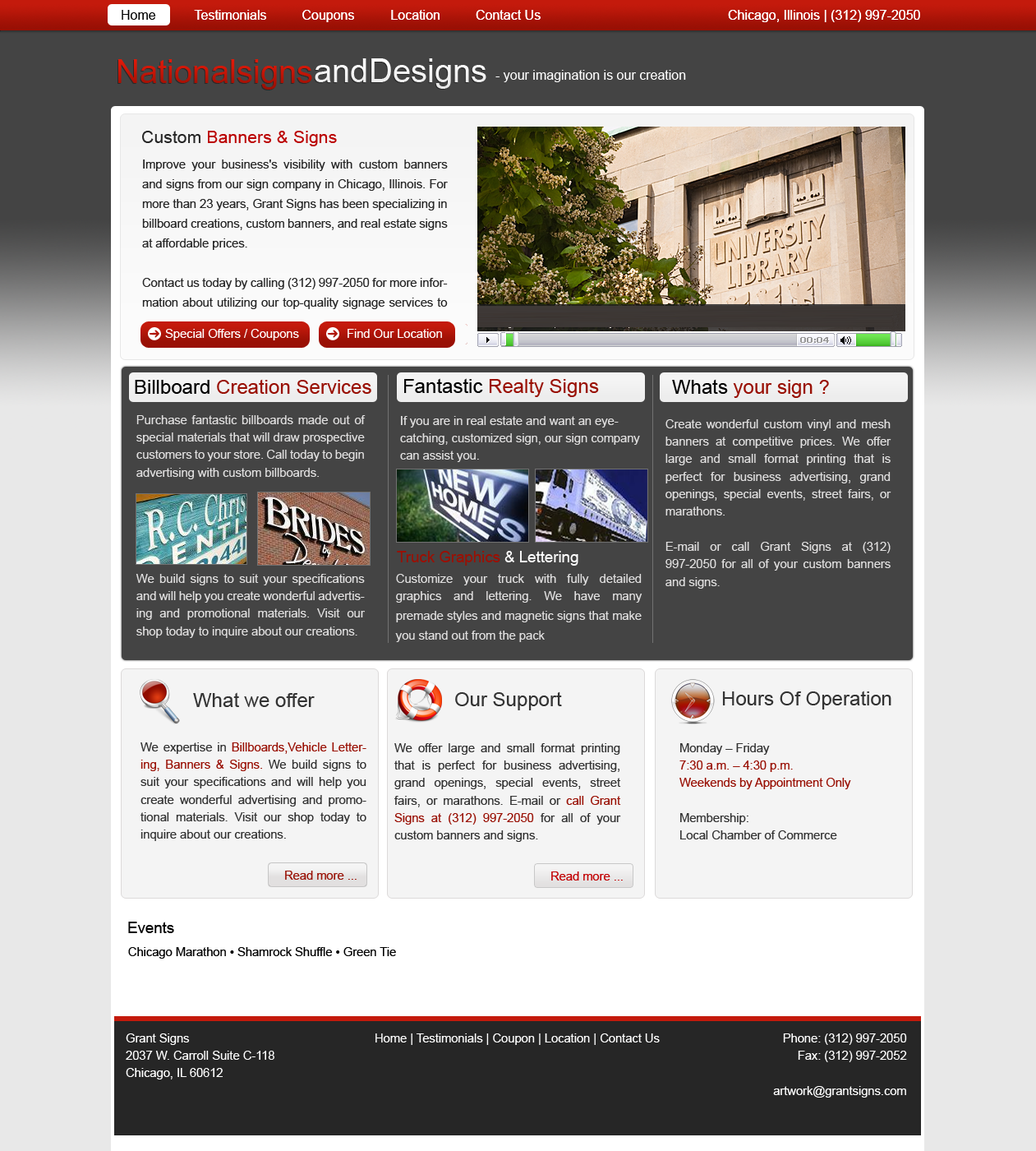
<style>
.page{position:relative;width:1036px;height:1151px}
.page>*{position:absolute;margin:0}
.t1{font:13.1px "ArialMT";color:#ffffff}
.t2{font:13.1px "ArialMT";color:#000000}
.t3{font:32.9px "ArialMT";color:#c11507}
.t4{font:32.9px "ArialMT";color:#ffffff}
.t5{font:17.5px "ArialMT";color:#bb0404}
.t6{font:17.5px "ArialMT";color:#262626}
.t7{font:12.1px/19.7px "ArialMT";color:#262626}
.t8{font:12.1px "ArialMT";color:#ffffff}
.t9{font:19.7px "ArialMT";color:#991004}
.t10{font:19.7px "ArialMT";color:#000000}
.t11{font:12.1px/17.5px "ArialMT";color:#e0dfdf}
.t12{font:15.3px "ArialMT";color:#991004}
.t13{font:15.3px "ArialMT";color:#ffffff}
.t14{font:12.1px/19.7px "ArialMT";color:#e0dfdf}
.t15{font:19.7px "ArialMT";color:#333333}
.t16{font:12.1px/17.5px "ArialMT";color:#333333}
.t17{font:12.1px/17.5px "ArialMT";color:#991004}
.t18{font:12.1px "ArialMT";color:#991004}
.t19{font:12.1px "ArialMT";color:#c20002}
.t20{font:15.3px "ArialMT";color:#000000}
.t21{font:12.1px "ArialMT";color:#000000}
.t22{font:12.1px/17.5px "ArialMT";color:#ffffff}
</style>
<div class="page">
<p class="t1" style="left:122px;top:10px;width:419px;height:12px"><span class="t2">Home</span>     Testimonials   Coupons   Location  Contact Us</p>
<p class="t1" style="left:194px;top:10px;width:347px;height:12px"><span class="t2">      </span>Testimonials   Coupons   Location  Contact Us</p>
<p class="t1" style="left:728px;top:10px;width:192px;height:12px">Chicago, Illinois | (312) 997-2050</p>
<p class="t1" style="left:728px;top:10px;width:192px;height:12px">Chicago, Illinois | (312) 997-2050</p>
<p class="t3" style="left:118px;top:59px;width:194px;height:31px">Nationalsigns</p>
<p class="t4" style="left:315px;top:58px;width:172px;height:31px">andDesigns</p>
<p class="t1" style="left:496px;top:70px;width:190px;height:12px">- your imagination is our creation</p>
<p class="t5" style="left:142px;top:131px;width:195px;height:15px"><span class="t6">Custom </span>Banners &amp; Signs</p>
<p class="t7" style="left:142px;top:159px;width:306px;height:150px;text-align:justify">Improve your business's visibility with custom banners and signs from our sign company in Chicago, Illinois. For more than 23 years, Grant Signs has been specializing in billboard creations, custom banners, and real estate signs at affordable prices. <br><br>Contact us today by calling (312) 997-2050 for more information about utilizing our top-quality signage services to meet your advertising needs.</p>
<p class="t8" style="left:165px;top:329px;width:134px;height:11px">Special Offers / Coupons</p>
<p class="t8" style="left:348px;top:329px;width:94px;height:9px">Find Our Location</p>
<p class="t9" style="left:135px;top:379px;width:236px;height:15px"><span class="t10">Billboard </span>Creation Services</p>
<p class="t9" style="left:404px;top:378px;width:195px;height:19px"><span class="t10">Fantastic </span>Realty Signs</p>
<p class="t9" style="left:672px;top:379px;width:157px;height:19px"><span class="t10">Whats </span>your sign ?</p>
<p class="t11" style="left:136px;top:415px;width:230px;height:64px;text-align:justify">Purchase fantastic billboards made out of special materials that will draw prospective customers to your store. Call today to begin advertising with custom billboards.</p>
<p class="t11" style="left:400px;top:416px;width:240px;height:46px">If you are in real estate and want an eye-catching, customized sign, our sign company can assist you.</p>
<p class="t11" style="left:666px;top:419px;width:226px;height:169px;text-align:justify">Create wonderful custom vinyl and mesh banners at competitive prices. We offer large and small format printing that is perfect for business advertising, grand openings, special events, street fairs, or marathons.<br><br>E-mail or call Grant Signs at (312) 997-2050 for all of your custom banners and signs.</p>
<p class="t12" style="left:397px;top:551px;width:182px;height:14px">Truck Graphics<span class="t13"> &amp; Lettering</span></p>
<p class="t11" style="left:136px;top:574px;width:229px;height:64px;text-align:justify">We build signs to suit your specifications and will help you create wonderful advertising and promotional materials. Visit our shop today to inquire about our creations.</p>
<p class="t11" style="left:395px;top:574px;width:248px;height:68px;text-align:justify">Customize your truck with fully detailed graphics and lettering. We have many premade styles and <span class="t14">magnetic signs that make you stand out from the pack</span></p>
<p class="t15" style="left:193px;top:692px;width:122px;height:15px">What we offer</p>
<p class="t15" style="left:455px;top:691px;width:107px;height:19px">Our Support</p>
<p class="t15" style="left:722px;top:690px;width:170px;height:19px">Hours Of Operation</p>
<p class="t16" style="left:141px;top:742px;width:226px;height:99px;text-align:justify">We expertise in <span class="t17">Billboards,Vehicle Lettering, Banners &amp; Signs.</span> We build signs to suit your specifications and will help you create wonderful advertising and promotional materials. Visit our shop today to inquire about our creations.</p>
<p class="t16" style="left:394px;top:743px;width:227px;height:99px;text-align:justify">We offer large and small format printing that is perfect for business advertising, grand openings, special events, street fairs, or marathons. E-mail or <span class="t17">call Grant Signs at (312) 997-2050 </span>for all of your custom banners and signs.</p>
<p class="t17" style="left:680px;top:743px;width:171px;height:96px;text-align:justify"><span class="t16">Monday – Friday<br></span>7:30 a.m. – 4:30 p.m.<br>Weekends by Appointment Only<br> <span class="t16"><br>Membership:<br>Local Chamber of Commerce</span></p>
<p class="t18" style="left:285px;top:870px;width:72px;height:9px">Read more ...</p>
<p class="t19" style="left:551px;top:871px;width:72px;height:9px">Read more ...</p>
<p class="t20" style="left:128px;top:921px;width:46px;height:12px">Events</p>
<p class="t21" style="left:128px;top:947px;width:268px;height:11px">Chicago Marathon • Shamrock Shuffle • Green Tie</p>
<p class="t22" style="left:126px;top:1033px;width:148px;height:46px;text-align:justify">Grant Signs <br>2037 W. Carroll Suite C-118<br>Chicago, IL 60612</p>
<p class="t8" style="left:376px;top:1033px;width:284px;height:12px">Home | Testimonials | Coupon | Location | Contact Us</p>
<p class="t22" style="left:773px;top:1033px;width:134px;height:64px;text-align:right">Phone: (312) 997-2050 <br>Fax: (312) 997-2052 <br> <br>artwork@grantsigns.com</p>
</div>
